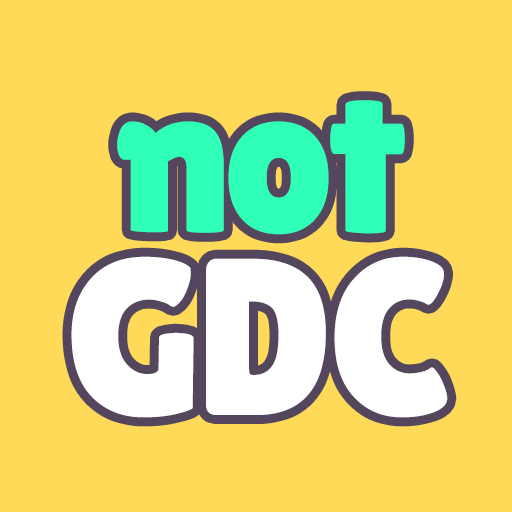
<style>
.page{position:relative;width:512px;height:512px;background:#ffd958}
.page>*{position:absolute;margin:0}
.t1{font:216.5px/182.7px "LilitaOne";letter-spacing:-0.04em;color:#30ffb8}
.t2{font:223px/182.7px "LilitaOne";letter-spacing:-0.04em;color:#ffffff}
.t3{font:223px/182.7px "LilitaOne";letter-spacing:-0.02em;color:#ffffff}
</style>
<div class="page">
<p class="t1" style="left:71px;top:100px;width:377px;height:318px;text-align:center">not<br><span class="t2">G</span><span class="t3">D</span><span class="t2">C</span></p>
</div>
